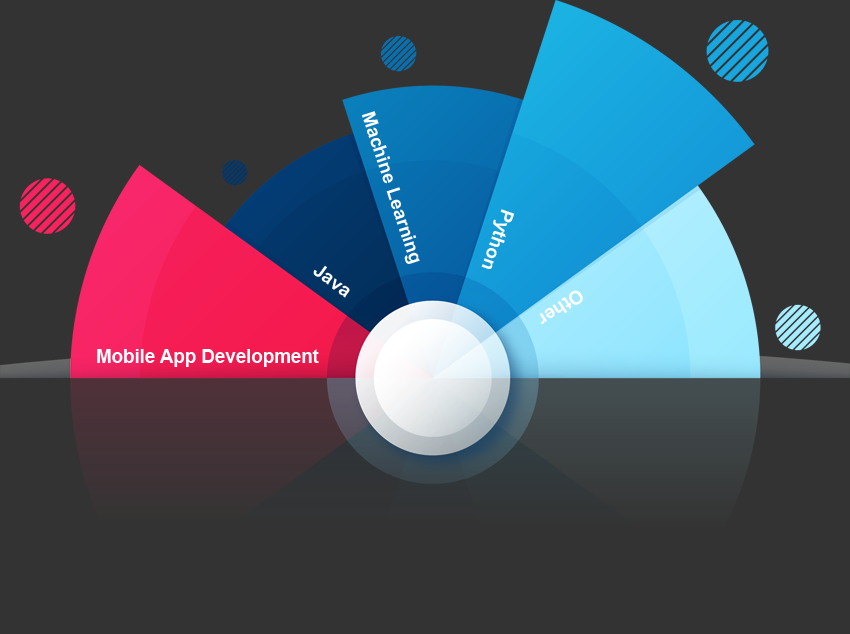
<style>
.page{position:relative;width:850px;height:634px;background:#333333}
.page>*{position:absolute;margin:0}
.t1{font:18.7px "Arial-BoldMT";color:#ffffff}
</style>
<div class="page">
<p class="t1" style="left:362px;top:111px;width:58px;height:153px;rotate:72deg">Machine Learning</p>
<p class="t1" style="left:481px;top:209px;width:34px;height:60px;rotate:109deg">Python</p>
<p class="t1" style="left:313px;top:265px;width:37px;height:33px;rotate:36deg">Java</p>
<p class="t1" style="left:539px;top:290px;width:44px;height:34px;rotate:147deg">Other</p>
<p class="t1" style="left:97px;top:349px;width:222px;height:18px">Mobile App Development</p>
</div>
